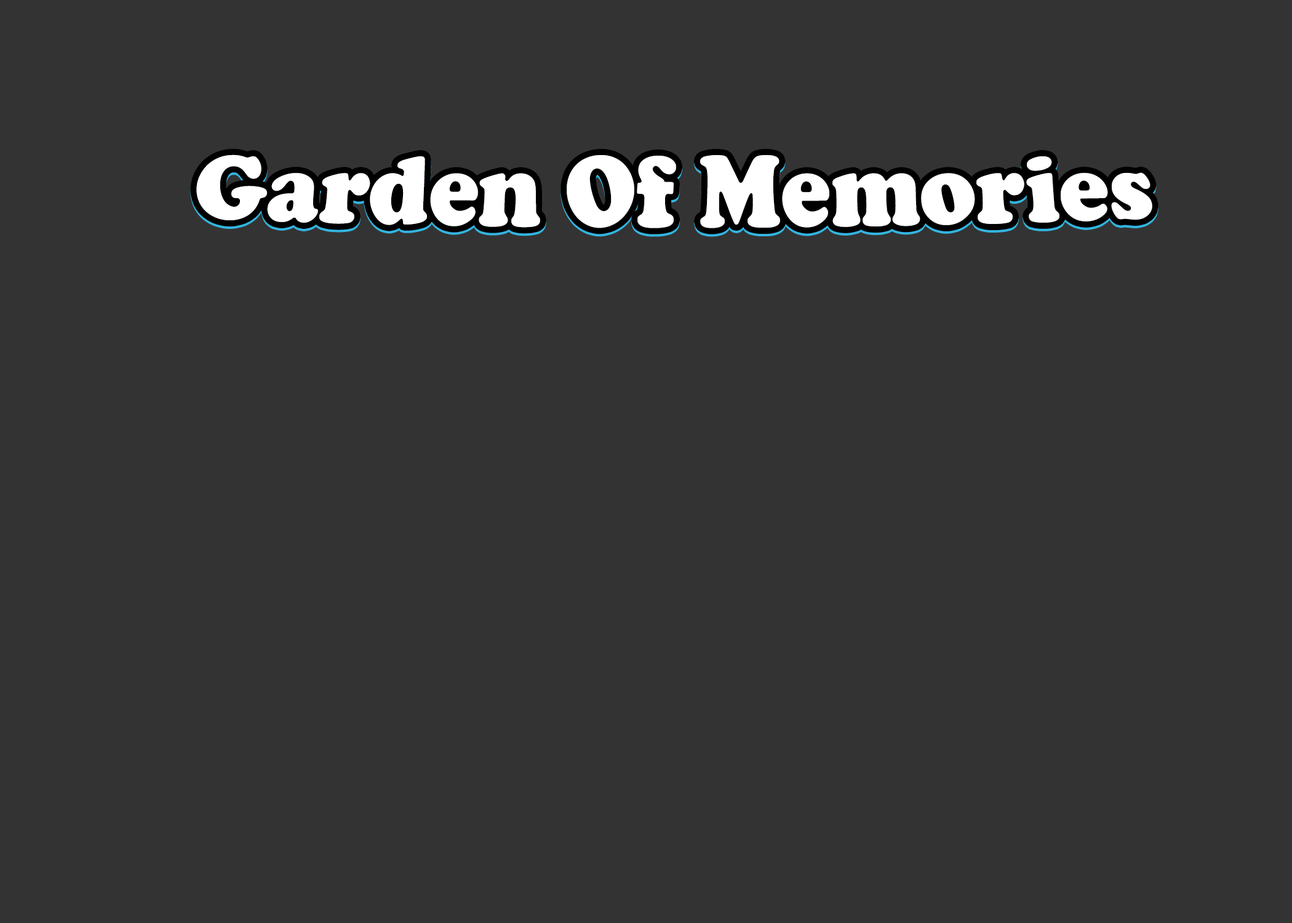
<style>
.page{position:relative;width:1292px;height:923px;background:#333333}
.page>*{position:absolute;margin:0}
.t1{font:92.3px "CooperBlack";color:#ffffff}
</style>
<div class="page">
<p class="t1" style="left:196px;top:157px;width:956px;height:74px">Garden Of Memories</p>
<p class="t1" style="left:196px;top:154px;width:956px;height:74px">Garden Of Memories</p>
</div>
